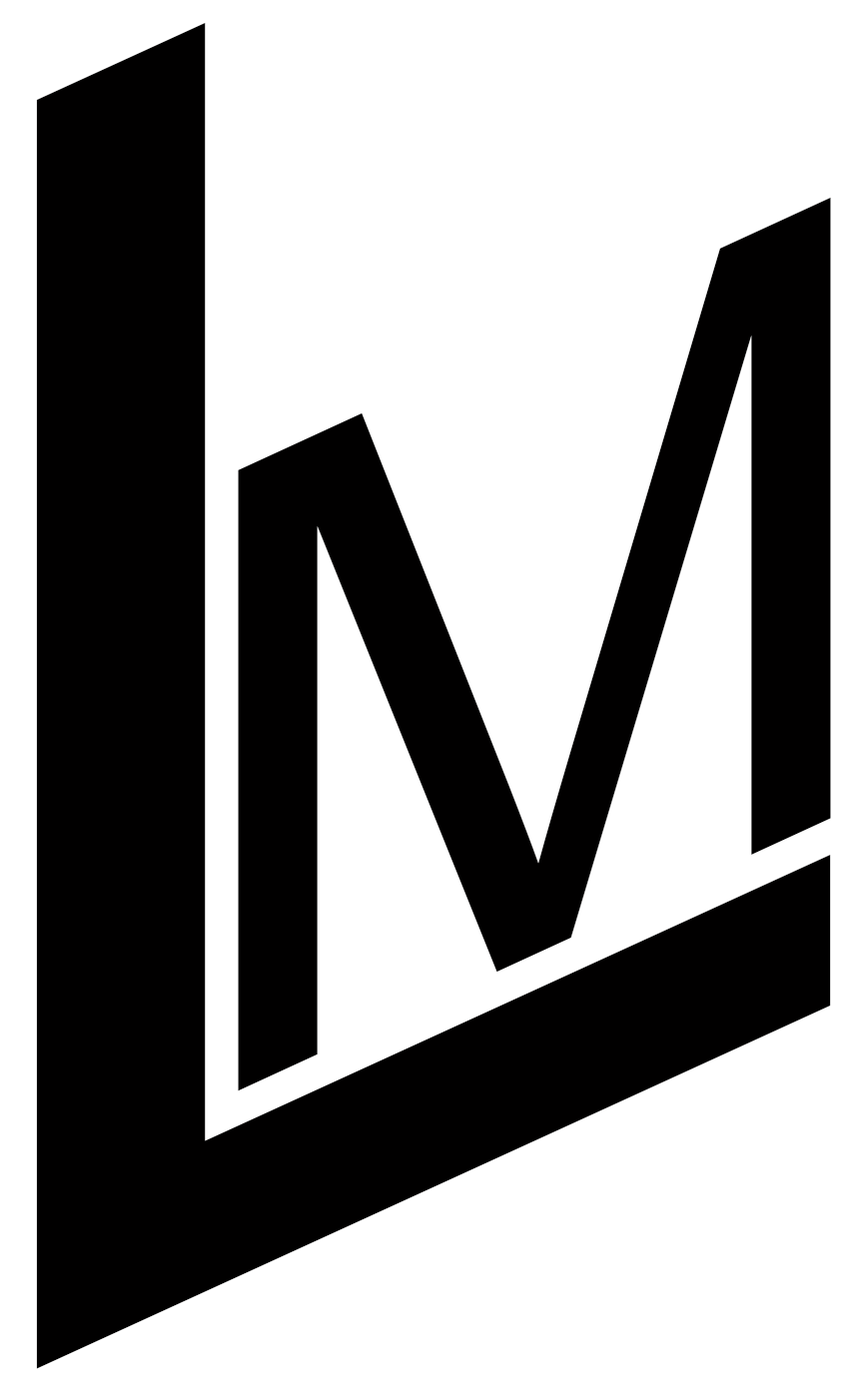
<style>
.page{position:relative;width:861px;height:1386px;background:#ffffff}
.page>*{position:absolute;margin:0}
.t1{font:1772.6px "ArialMT";color:#010000;scale:1.1 1}
.t2{font:866.9px "ArialMT";color:#010000;scale:1.1 1}
</style>
<div class="page">
<p class="t1" style="left:36px;top:22px;width:795px;height:1347px;rotate:-25deg">L</p>
<p class="t2" style="left:238px;top:197px;width:593px;height:894px;rotate:-25deg">M</p>
</div>
